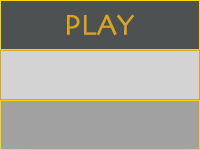
<style>
.page{position:relative;width:200px;height:150px;background:#a1a1a1}
.page>*{position:absolute;margin:0}
.t1{font:30px "Skia-Regular";color:#daa520}
</style>
<div class="page">
<p class="t1" style="left:67px;top:14px;width:67px;height:22px">PLAY</p>
</div>
